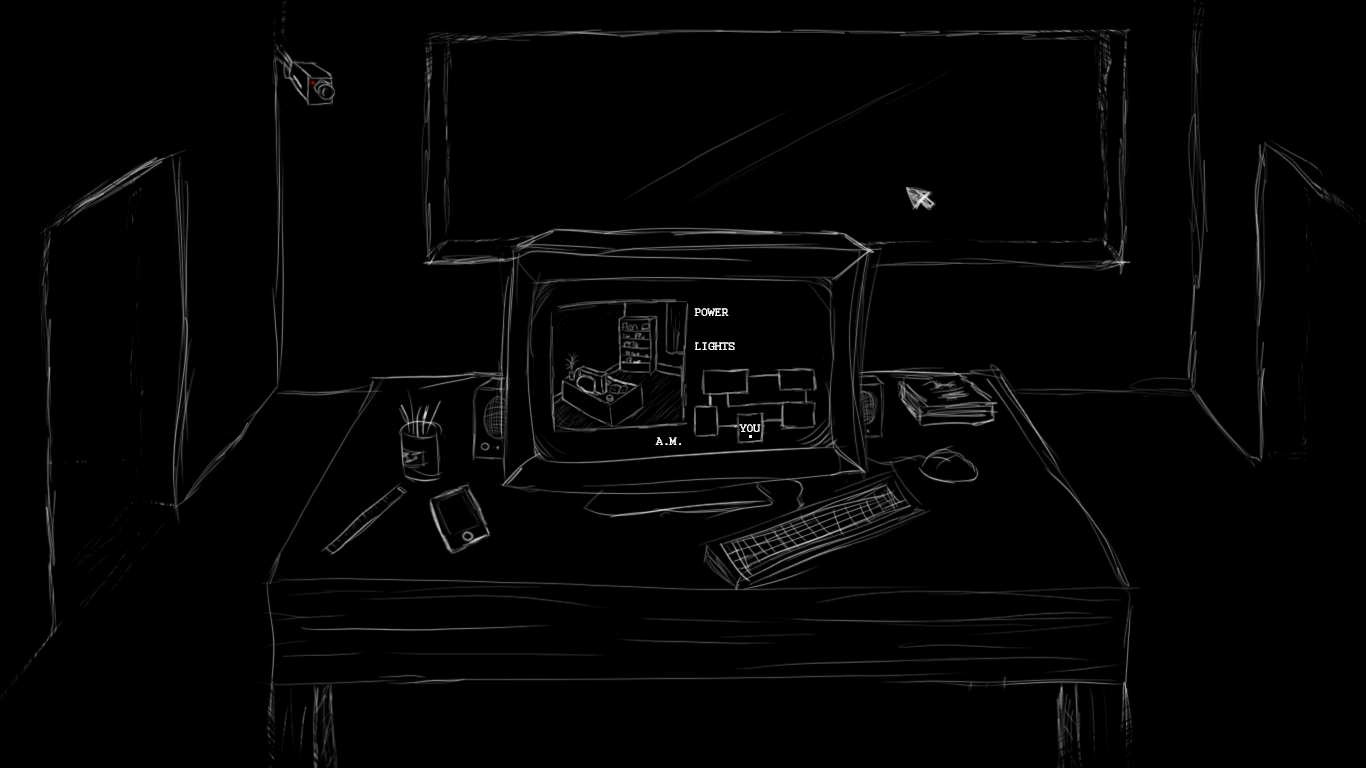
<style>
.page{position:relative;width:1366px;height:768px;background:#000000}
.page>*{position:absolute;margin:0}
.t1{font:12px "Courier";color:#ffffff}
</style>
<div class="page">
<p class="t1" style="left:694px;top:308px;width:35px;height:8px">POWER</p>
<p class="t1" style="left:695px;top:342px;width:40px;height:8px">LIGHTS</p>
<p class="t1" style="left:739px;top:424px;width:22px;height:8px">YOU</p>
<p class="t1" style="left:655px;top:437px;width:26px;height:8px">A.M.</p>
</div>
